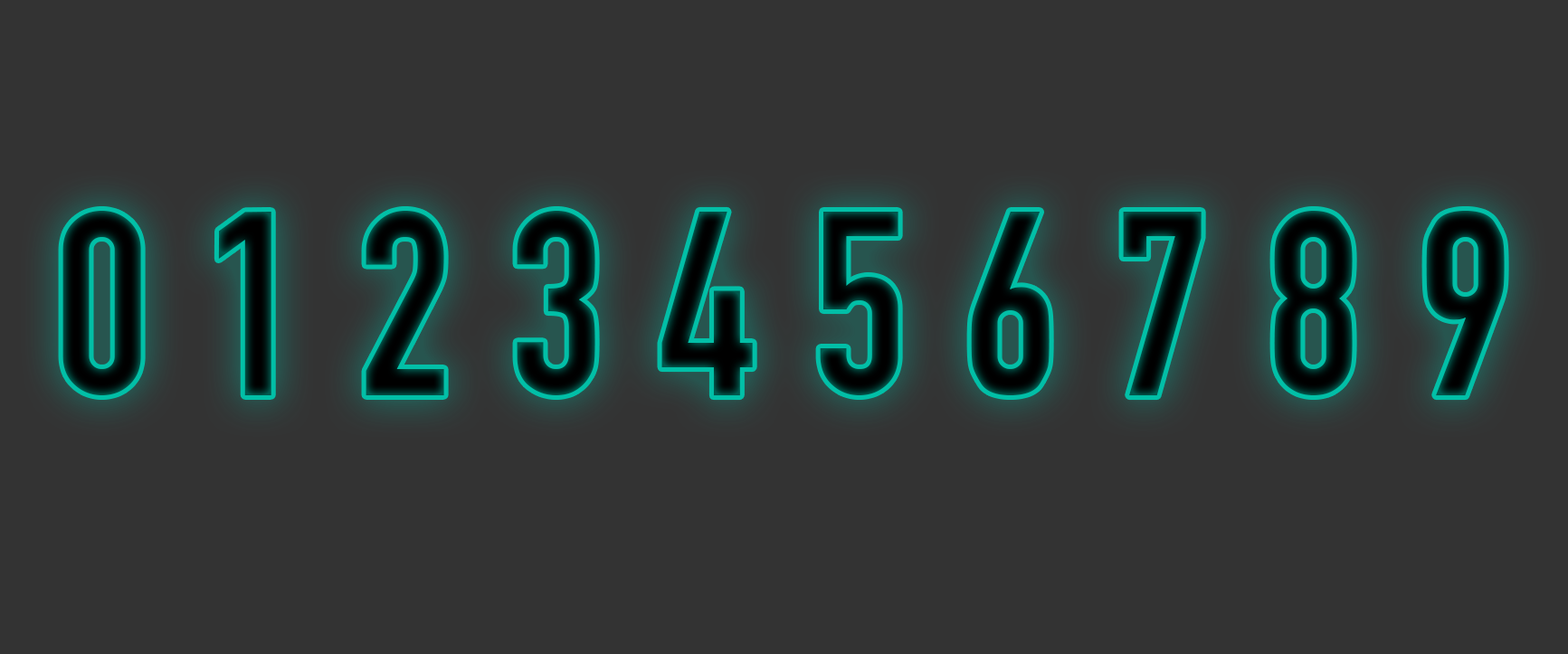
<style>
.page{position:relative;width:1568px;height:654px;background:#333333}
.page>*{position:absolute;margin:0}
.t1{font:256px "DINEngschrift";letter-spacing:0.22em}
</style>
<div class="page">
<p class="t1" style="left:62px;top:211px;width:1443px;height:185px">0123456789</p>
</div>
